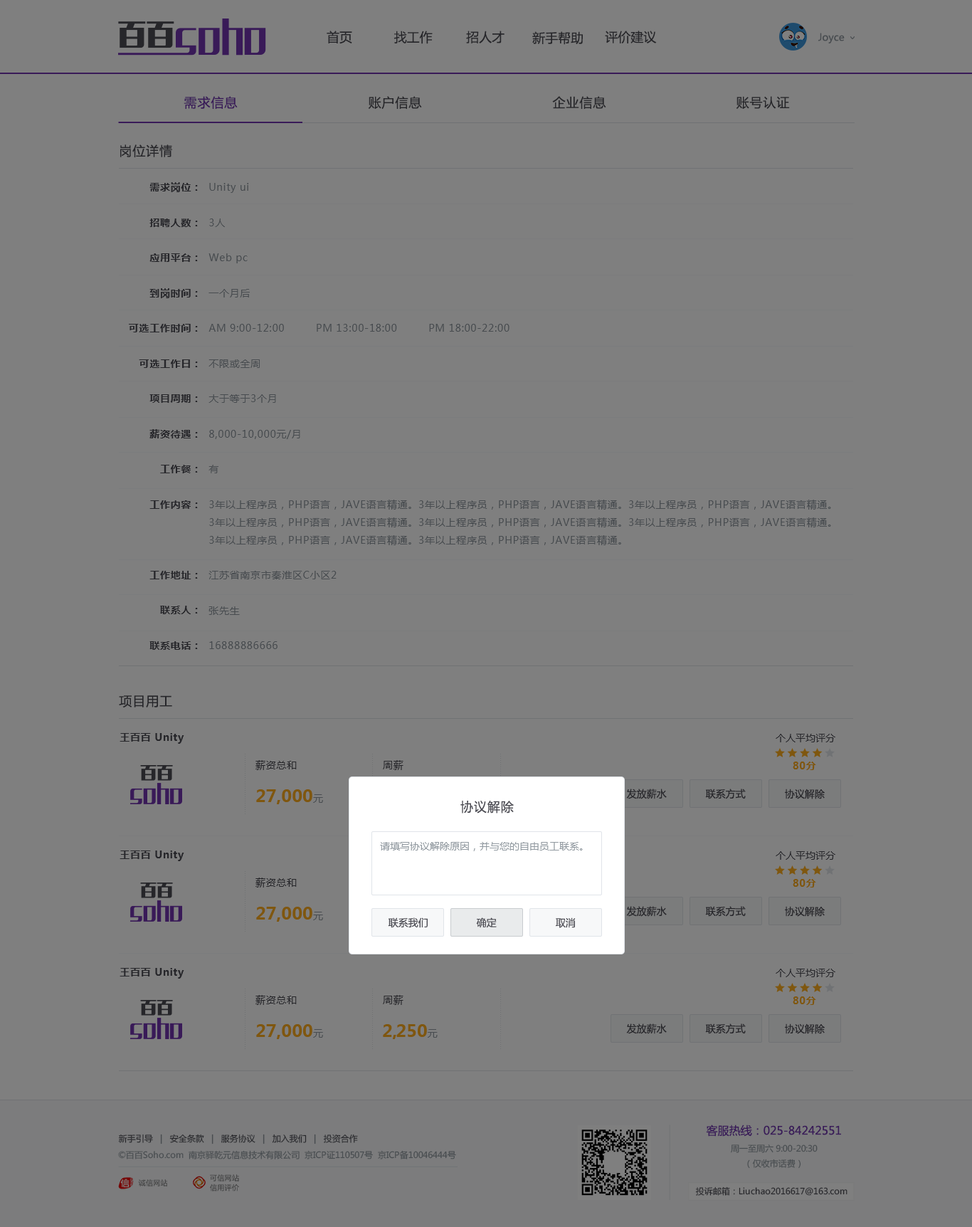
<style>
.page{position:relative;width:972px;height:1227px;background:#7f7f7f}
.page>*{position:absolute;margin:0}
.t1{font:12.8px "MicrosoftYaHei";color:#26262a}
.t2{font:10px "MicrosoftYaHei";color:#484c50}
.t3{font:12.8px "MicrosoftYaHei";letter-spacing:0.05em;color:#391a58}
.t4{font:12.8px "MicrosoftYaHei";letter-spacing:0.05em;color:#26262a}
.t5{font:10px/35.2px "MicrosoftYaHei-Bold";letter-spacing:0.05em;color:#26262a}
.t6{font:10px/17.8px "MicrosoftYaHei";letter-spacing:0.05em;color:#484c50}
.t7{font:10px/35.2px "MicrosoftYaHei";letter-spacing:0.05em;color:#484c50}
.t8{font:10px "MicrosoftYaHei-Bold";letter-spacing:0.05em;color:#26262a}
.t9{font:10px "MicrosoftYaHei";color:#26262a}
.t10{font:4.3px "SimSun";color:#6f7173}
.t11{font:10px "MicrosoftYaHei";letter-spacing:0.05em;color:#26262a}
.t12{font:10px "MicrosoftYaHei-Bold";letter-spacing:0.05em;color:#7f570f}
.t13{font:17.1px "MicrosoftYaHei-Bold";color:#7f570f}
.t14{font:10px "MicrosoftYaHei";color:#7f570f}
.t15{font:12.8px "MicrosoftYaHei";letter-spacing:0.05em;color:#4c4c54}
.t16{font:10px "MicrosoftYaHei";color:#9199a0}
.t17{font:10px "MicrosoftYaHei";color:#4c4c54}
.t18{font:17.1px "MicrosoftYaHei-Bold";letter-spacing:-0.1em;color:#7f570f}
.t19{font:8.5px "MicrosoftYaHei"}
.t20{font:11.4px "MicrosoftYaHei";color:#391a58}
.t21{font:8.5px/14.7px "MicrosoftYaHei";color:#484c50}
.t22{font:8.5px "MicrosoftYaHei";color:#484c50}
.t23{font:8.5px "MicrosoftYaHei";color:#26262a}
</style>
<div class="page">
<p class="t1" style="left:327px;top:31px;width:25px;height:13px">首页</p>
<p class="t1" style="left:394px;top:31px;width:39px;height:13px">找工作</p>
<p class="t1" style="left:466px;top:31px;width:39px;height:12px">招人才</p>
<p class="t1" style="left:532px;top:31px;width:51px;height:14px">新手帮助</p>
<p class="t1" style="left:605px;top:31px;width:52px;height:12px">评价建议</p>
<p class="t2" style="left:818px;top:33px;width:27px;height:10px">Joyce</p>
<p class="t3" style="left:184px;top:96px;width:54px;height:13px">需求信息</p>
<p class="t4" style="left:368px;top:96px;width:54px;height:14px">账户信息</p>
<p class="t4" style="left:552px;top:96px;width:54px;height:13px">企业信息</p>
<p class="t4" style="left:736px;top:96px;width:54px;height:13px">账号认证</p>
<p class="t4" style="left:120px;top:144px;width:52px;height:13px">岗位详情</p>
<p class="t5" style="left:129px;top:182px;width:69px;height:468px;text-align:right">需求岗位：<br>招聘人数：<br>应用平台：<br>到岗时间：<br>可选工作时间：<br>可选工作日：<br>项目周期：<br>薪资待遇：<br>工作餐：<br>工作内容：<br><br>工作地址：<br>联系人：<br>联系电话：</p>
<p class="t6" style="left:208px;top:183px;width:623px;height:466px"><span class="t7">Unity ui<br>3人<br>Web pc<br>一个月后<br>AM 9:00-12:00         PM 13:00-18:00         PM 18:00-22:00<br>不限或全周<br>大于等于3个月<br>8,000-10,000元/月<br>有<br></span>3年以上程序员，PHP语言，JAVE语言精通。3年以上程序员，PHP语言，JAVE语言精通。3年以上程序员，PHP语言，JAVE语言精通。3年以上程序员，PHP语言，JAVE语言精通。3年以上程序员，PHP语言，JAVE语言精通。3年以上程序员，PHP语言，JAVE语言精通。3年以上<span class="t7">程序员，PHP语言，JAVE语言精通。3年以上程序员，PHP语言，JAVE语言精通。<br>江苏省南京市秦淮区C小区2<br>张先生<br>16888886666</span></p>
<p class="t4" style="left:119px;top:695px;width:53px;height:12px">项目用工</p>
<p class="t8" style="left:120px;top:733px;width:64px;height:11px">王百百 Unity</p>
<p class="t9" style="left:776px;top:734px;width:59px;height:8px">个人平均评分</p>
<p class="t10" style="left:245px;top:754px;width:0px;height:60px;rotate:90deg">.............................</p>
<p class="t11" style="left:255px;top:760px;width:42px;height:10px">薪资总和</p>
<p class="t11" style="left:383px;top:760px;width:20px;height:10px">周薪</p>
<p class="t12" style="left:793px;top:761px;width:23px;height:9px">80分</p>
<p class="t13" style="left:256px;top:789px;width:67px;height:15px">27,000<span class="t14">元</span></p>
<p class="t9" style="left:626px;top:788px;width:41px;height:11px">发放薪水</p>
<p class="t9" style="left:705px;top:788px;width:41px;height:11px">联系方式</p>
<p class="t9" style="left:785px;top:788px;width:40px;height:11px">协议解除</p>
<p class="t15" style="left:460px;top:801px;width:54px;height:12px">协议解除</p>
<p class="t16" style="left:380px;top:842px;width:203px;height:9px">请填写协议解除原因，并与您的自由员工联系。</p>
<p class="t8" style="left:120px;top:850px;width:64px;height:11px">王百百 Unity</p>
<p class="t9" style="left:776px;top:851px;width:59px;height:9px">个人平均评分</p>
<p class="t10" style="left:245px;top:871px;width:0px;height:60px;rotate:90deg">.............................</p>
<p class="t11" style="left:255px;top:877px;width:42px;height:10px">薪资总和</p>
<p class="t12" style="left:793px;top:879px;width:23px;height:8px">80分</p>
<p class="t9" style="left:626px;top:906px;width:41px;height:11px">发放薪水</p>
<p class="t9" style="left:705px;top:906px;width:41px;height:11px">联系方式</p>
<p class="t9" style="left:785px;top:906px;width:40px;height:11px">协议解除</p>
<p class="t13" style="left:256px;top:907px;width:67px;height:14px">27,000<span class="t14">元</span></p>
<p class="t17" style="left:388px;top:917px;width:40px;height:11px">联系我们</p>
<p class="t17" style="left:476px;top:917px;width:21px;height:11px">确定</p>
<p class="t17" style="left:556px;top:917px;width:20px;height:11px">取消</p>
<p class="t8" style="left:120px;top:968px;width:64px;height:10px">王百百 Unity</p>
<p class="t9" style="left:776px;top:968px;width:59px;height:9px">个人平均评分</p>
<p class="t10" style="left:245px;top:988px;width:0px;height:61px;rotate:90deg">.............................</p>
<p class="t10" style="left:372px;top:988px;width:1px;height:61px;rotate:90deg">.............................</p>
<p class="t10" style="left:500px;top:988px;width:1px;height:61px;rotate:90deg">.............................</p>
<p class="t11" style="left:255px;top:995px;width:42px;height:10px">薪资总和</p>
<p class="t11" style="left:383px;top:995px;width:20px;height:10px">周薪</p>
<p class="t12" style="left:793px;top:996px;width:23px;height:9px">80分</p>
<p class="t13" style="left:256px;top:1024px;width:67px;height:15px">27,000<span class="t14">元</span></p>
<p class="t13" style="left:383px;top:1024px;width:55px;height:15px">2<span class="t18">,</span>250<span class="t14">元</span></p>
<p class="t9" style="left:626px;top:1023px;width:41px;height:11px">发放薪水</p>
<p class="t9" style="left:705px;top:1023px;width:41px;height:11px">联系方式</p>
<p class="t9" style="left:785px;top:1023px;width:40px;height:11px">协议解除</p>
<p class="t19" style="left:118px;top:1134px;width:240px;height:10px">新手引导   |   安全条款   |   服务协议   |   加入我们   |   投资合作</p>
<p class="t20" style="left:706px;top:1124px;width:135px;height:12px">客服热线：025-84242551</p>
<p class="t21" style="left:731px;top:1144px;width:87px;height:24px;text-align:center">周一至周六 9:00-20:30<br>（仅收市话费）</p>
<p class="t22" style="left:118px;top:1150px;width:338px;height:9px">©百百Soho.com  南京驿乾元信息技术有限公司  京ICP证110507号  京ICP备10046444号</p>
<p class="t23" style="left:695px;top:1186px;width:152px;height:9px">投诉邮箱：Liuchao2016617@163.com</p>
</div>
